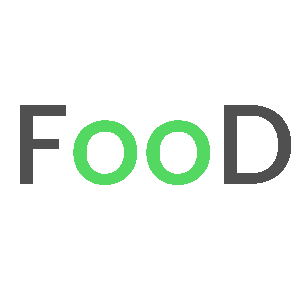
<style>
.page{position:relative;width:300px;height:300px;background:#ffffff}
.page>*{position:absolute;margin:0}
.t1{font:113.8px "Poppins-Medium";color:#53d962}
.t2{font:113.8px "Poppins-Medium";color:#515050}
</style>
<div class="page">
<p class="t1" style="left:20px;top:105px;width:271px;height:80px"><span class="t2">F</span>oo<span class="t2">D</span></p>
</div>
